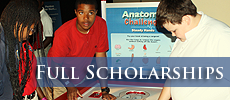
<style>
.page{position:relative;width:230px;height:100px}
.page>*{position:absolute;margin:0}
.t1{font:18px "TrajanPro-Bold";color:#ffffff}
</style>
<div class="page">
<p class="t1" style="left:36px;top:65px;width:187px;height:14px">Full Scholarships</p>
</div>
